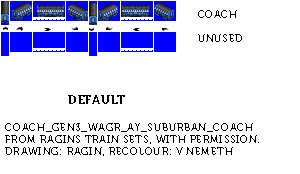
<style>
.page{position:relative;width:300px;height:174px;background:#ffffff}
.page>*{position:absolute;margin:0}
.t1{font:10px "Museo700-Regular";letter-spacing:0.075em;color:#000000;text-transform:uppercase}
.t2{font:12px "Museo700-Regular";letter-spacing:0.075em;color:#000000;text-transform:uppercase}
</style>
<div class="page">
<p class="t1" style="left:198px;top:10px;width:44px;height:32px">coach<br><br>unused</p>
<p class="t2" style="left:68px;top:95px;width:57px;height:9px">DEFAULT</p>
<p class="t1" style="left:5px;top:123px;width:254px;height:33px">Coach_Gen3_WAGR_AY_Suburban_Coach<br>From Ragins Train Sets, with permission.<br>Drawing: Ragin, recolour: V Nemeth</p>
</div>
